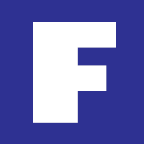
<style>
.page{position:relative;width:144px;height:144px;background:#2e3192}
.page>*{position:absolute;margin:0}
.t1{font:135px "GillSans-UltraBold";color:#ffffff}
</style>
<div class="page">
<p class="t1" style="left:33px;top:22px;width:83px;height:101px">F</p>
</div>
